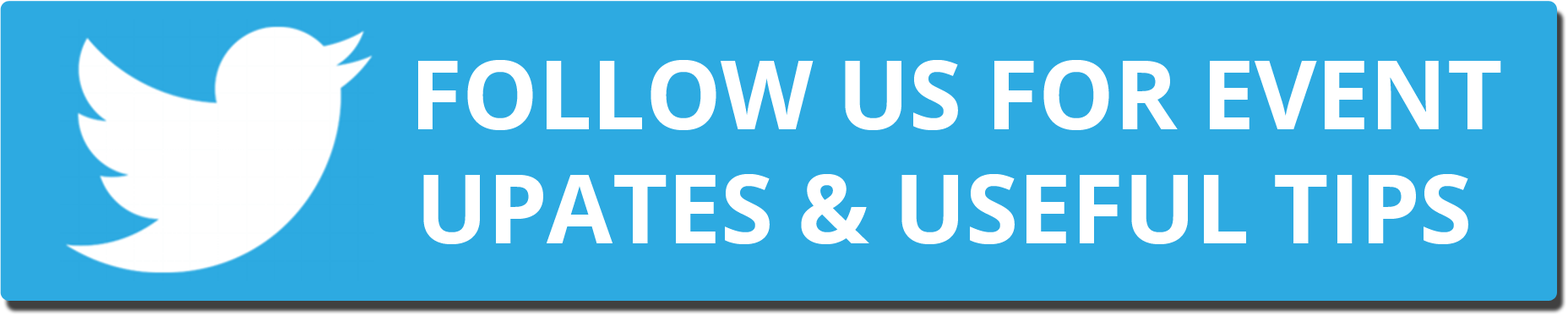
<style>
.page{position:relative;width:1568px;height:316px;background:#2daae1}
.page>*{position:absolute;margin:0}
.t1{font:95px "OpenSans-Bold";color:#ffffff}
</style>
<div class="page">
<p class="t1" style="left:418px;top:60px;width:1083px;height:184px;text-align:center">FOLLOW US FOR EVENT<br>UPATES &amp; USEFUL TIPS</p>
</div>
